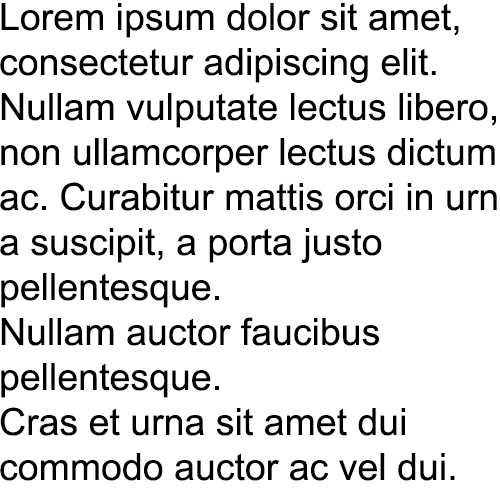
<style>
.page{position:relative;width:500px;height:500px;background:#ffffff}
.page>*{position:absolute;margin:0}
.t1{font:37.5px "ArialMT";color:#000000}
</style>
<div class="page">
<p class="t1" style="left:0px;top:3px;width:497px;height:478px">Lorem ipsum dolor sit amet,<br>consectetur adipiscing elit.<br>Nullam vulputate lectus libero,<br>non ullamcorper lectus dictum<br>ac. Curabitur mattis orci in urn<br>a suscipit, a porta justo<br>pellentesque.<br>Nullam auctor faucibus<br>pellentesque.<br>Cras et urna sit amet dui<br>commodo auctor ac vel dui.</p>
</div>
